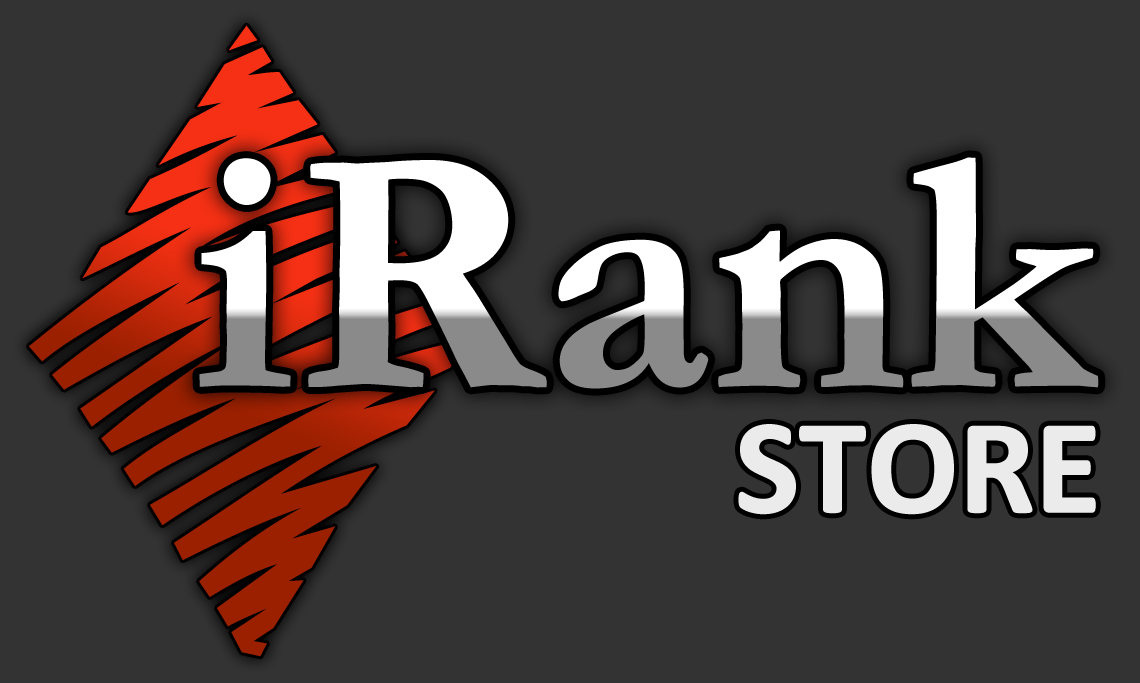
<style>
.page{position:relative;width:1140px;height:683px;background:#333333}
.page>*{position:absolute;margin:0}
.t1{font:353.2px "Garamond-Bold";letter-spacing:-0.025em;font-weight:bold}
.t2{font:135.6px "Calibri-Bold";letter-spacing:-0.025em;color:#ffffff;font-weight:bold}
</style>
<div class="page">
<p class="t1" style="left:199px;top:157px;width:900px;height:232px">iRank</p>
<p class="t2" style="left:738px;top:424px;width:358px;height:91px">STORE</p>
</div>
